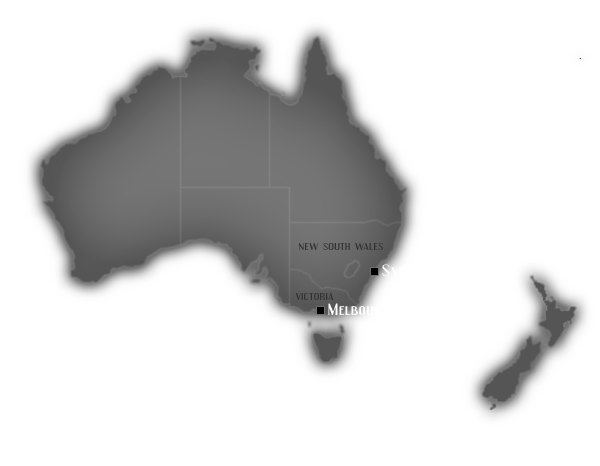
<style>
.page{position:relative;width:600px;height:466px;background:#ffffff}
.page>*{position:absolute;margin:0}
.t1{font:8.8px "Engebrechtre";letter-spacing:0.05em;color:#424242;scale:1.25 1}
.t2{font:14.4px "Engebrechtre";letter-spacing:0.05em;color:#ffffff;scale:1.25 1}
</style>
<div class="page">
<p class="t1" style="left:299px;top:243px;width:84px;height:7px">NEW SOUTH WALES</p>
<p class="t1" style="left:295px;top:293px;width:39px;height:7px">VICTORIA</p>
<p class="t2" style="left:328px;top:303px;width:67px;height:12px">Melbourne</p>
</div>
